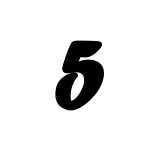
<style>
.page{position:relative;width:155px;height:155px;background:#ffffff}
.page>*{position:absolute;margin:0}
.t1{font:103.5px "ForteMT";letter-spacing:0.011em;color:#000000;font-weight:bold}
</style>
<div class="page">
<p class="t1" style="left:55px;top:40px;width:49px;height:71px">5</p>
</div>
